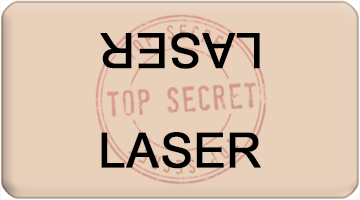
<style>
.page{position:relative;width:360px;height:200px;background:#e8d0bb}
.page>*{position:absolute;margin:0}
.t1{font:48px "ArialMT";color:#000000;font-weight:bold}
</style>
<div class="page">
<p class="t1" style="left:100px;top:32px;width:160px;height:37px;rotate:180deg">LASER</p>
<p class="t1" style="left:101px;top:132px;width:160px;height:37px">LASER</p>
</div>
